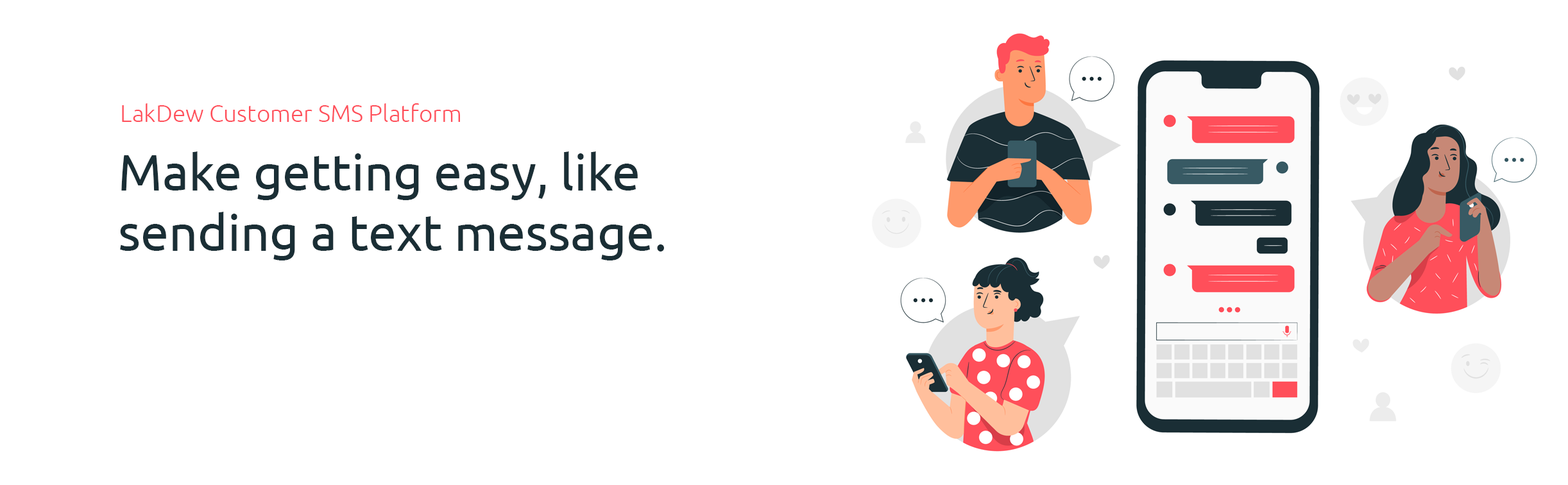
<style>
.page{position:relative;width:1568px;height:485px;background:#ffffff}
.page>*{position:absolute;margin:0}
.t1{font:23.7px "Ubuntu-Light";color:#ff4f5a}
.t2{font:50.5px "Ubuntu";color:#1a2e35}
</style>
<div class="page">
<p class="t1" style="left:122px;top:103px;width:338px;height:19px">LakDew Customer SMS Platform</p>
<p class="t2" style="left:120px;top:151px;width:544px;height:109px">Make getting easy, like <br>sending a text message.</p>
</div>
